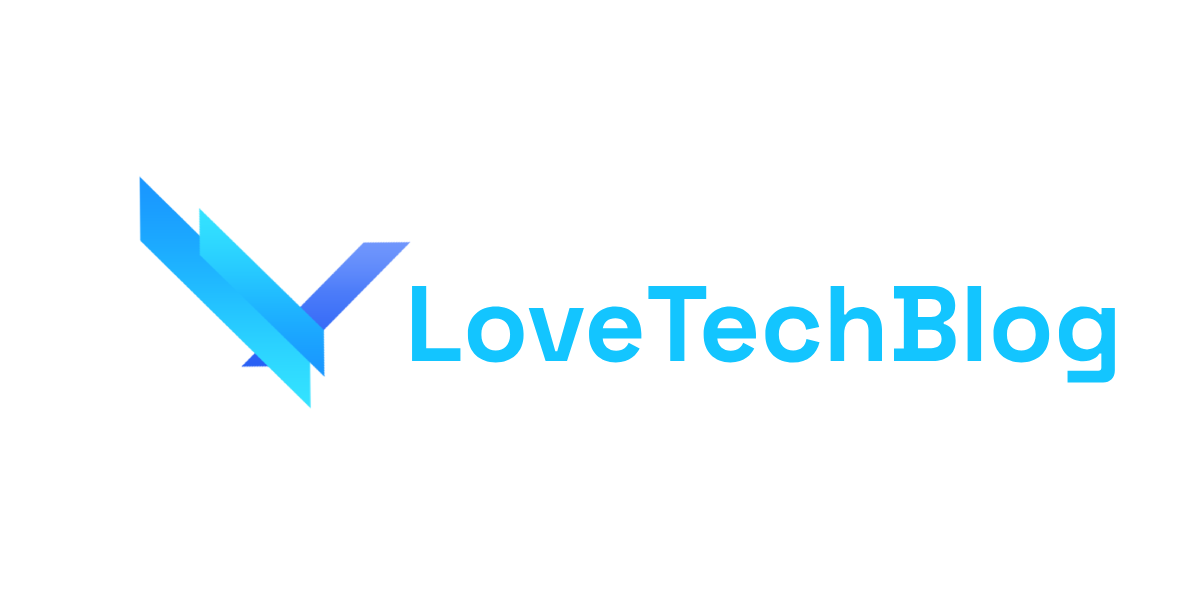
<style>
.page{position:relative;width:1200px;height:600px;background:#ffffff}
.page>*{position:absolute;margin:0}
.t1{font:107px "SpaceGrotesk-Bold";color:#13c5ff}
</style>
<div class="page">
<p class="t1" style="left:412px;top:286px;width:703px;height:97px">LoveTechBlog</p>
</div>
